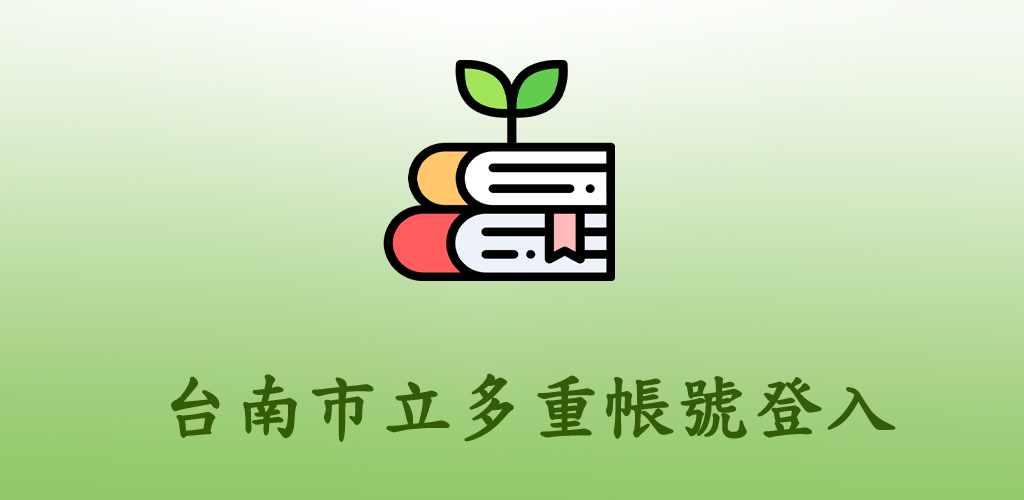
<style>
.page{position:relative;width:1024px;height:500px}
.page>*{position:absolute;margin:0}
.t1{font:72px "DFKaiShu-SB-Estd-BF";color:#335b08;font-weight:bold}
</style>
<div class="page">
<p class="t1" style="left:171px;top:373px;width:725px;height:69px">台南市立多重帳號登入</p>
</div>
